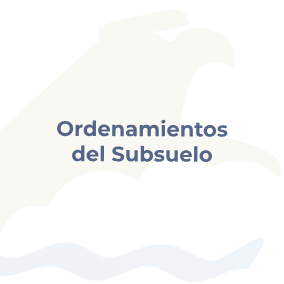
<style>
.page{position:relative;width:284px;height:284px;background:#ffffff}
.page>*{position:absolute;margin:0}
.t1{font:21px "Montserrat-Bold";color:#536689}
</style>
<div class="page">
<p class="t1" style="left:57px;top:119px;width:171px;height:43px;text-align:center">Ordenamientos<br>del Subsuelo</p>
</div>
